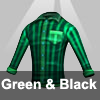
<style>
.page{position:relative;width:100px;height:100px;background:#c2c2c2}
.page>*{position:absolute;margin:0}
.t1{font:14px "Arial-BoldMT";color:#ffffff}
</style>
<div class="page">
<p class="t1" style="left:1px;top:78px;width:96px;height:12px">Green &amp; Black</p>
</div>
